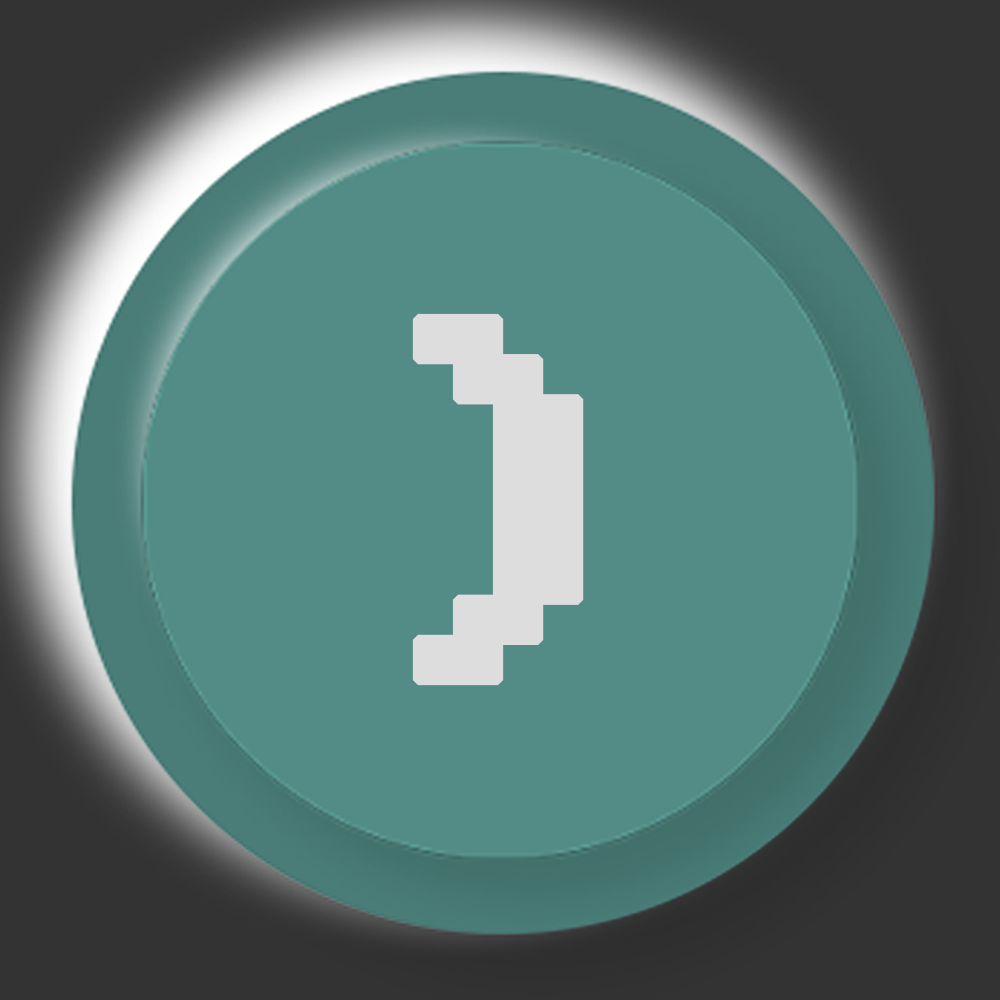
<style>
.page{position:relative;width:1000px;height:1000px;background:#538c86}
.page>*{position:absolute;margin:0}
.t1{font:641.7px "8bitoperator-JVE";color:#dddddd;font-weight:bold}
</style>
<div class="page">
<p class="t1" style="left:412px;top:313px;width:172px;height:373px">)</p>
</div>
